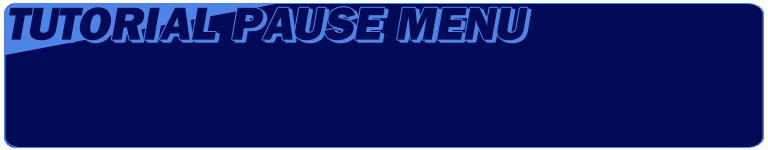
<style>
.page{position:relative;width:768px;height:150px;background:#030a58}
.page>*{position:absolute;margin:0}
.t1{font:48px "FranklinGothic-Heavy";letter-spacing:0.05em;color:#030a58;font-style:italic}
</style>
<div class="page">
<p class="t1" style="left:9px;top:7px;width:519px;height:34px">TUTORIAL PAUSE MENU</p>
</div>
